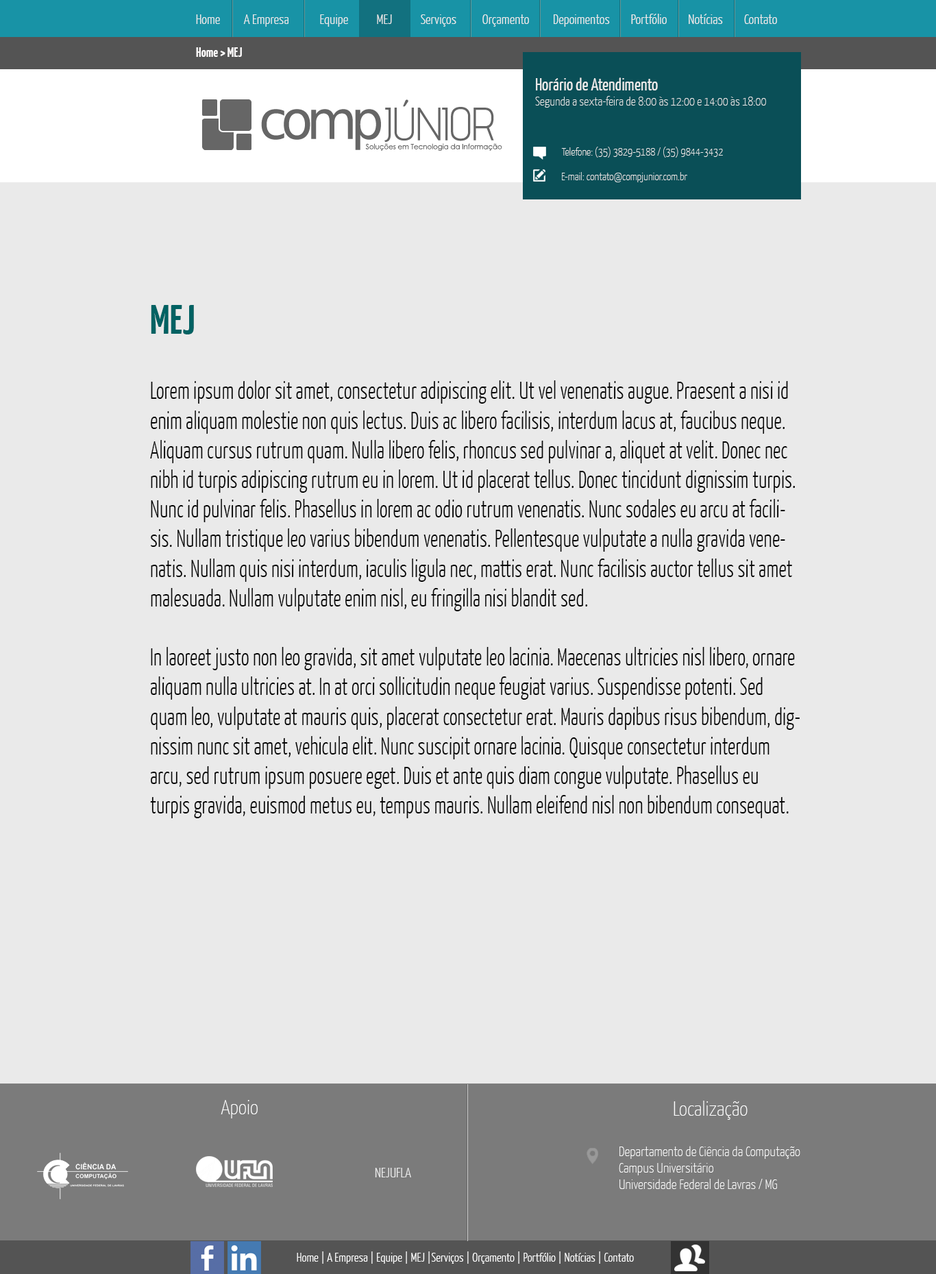
<style>
.page{position:relative;width:936px;height:1274px;background:#eaeaea}
.page>*{position:absolute;margin:0}
.t1{font:13.7px "YanoneKaffeesatz-Light";color:#eaeaea}
.t2{font:17.1px "YanoneKaffeesatz-Light";color:#999999}
.t3{font:13.7px "YanoneKaffeesatz-Bold";color:#fffdfd}
.t4{font:12.3px "YanoneKaffeesatz-ExtraLight";color:#eaeaea}
.t5{font:17.1px "YanoneKaffeesatz-Regular";color:#eaeaea}
.t6{font:11px "YanoneKaffeesatz-ExtraLight";color:#eaeaea}
.t7{font:13.7px "YanoneKaffeesatz-ExtraLight";color:#eaeaea}
.t8{font:41.1px "YanoneKaffeesatz-Bold";color:#006263}
.t9{font:24.7px "YanoneKaffeesatz-Light";color:#050505;scale:0.85 1}
.t10{font:20.6px "YanoneKaffeesatz-ExtraLight";color:#ffffff}
.t11{font:20.6px "YanoneKaffeesatz-ExtraLight";color:#fefefe}
.t12{font:13.7px "YanoneKaffeesatz-ExtraLight";color:#ffffff}
.t13{font:12.3px "YanoneKaffeesatz-Light";color:#ffffff}
</style>
<div class="page">
<p class="t1" style="left:196px;top:14px;width:581px;height:13px"><span class="t2"> </span>Home          A Empresa             Equipe            MEJ            Serviços           Orçamento          Depoimentos         Portfólio         Notícias         Contato</p>
<p class="t3" style="left:196px;top:47px;width:46px;height:10px">Home &gt; MEJ</p>
<p class="t4" style="left:535px;top:77px;width:231px;height:31px"><span class="t5">Horário de Atendimento<br></span>Segunda a sexta-feira de 8:00 às 12:00 e 14:00 às 18:00</p>
<p class="t6" style="left:561px;top:147px;width:162px;height:11px"><span class="t7"><br></span>Telefone: (35) 3829-5188 / (35) 9844-3432</p>
<p class="t6" style="left:562px;top:172px;width:125px;height:10px"><span class="t7"><br></span>E-mail: contato@compjunior.com.br</p>
<p class="t8" style="left:151px;top:305px;width:43px;height:29px">MEJ</p>
<p class="t9" style="left:150px;top:380px;width:650px;height:438px">Lorem ipsum dolor sit amet, consectetur adipiscing elit. Ut vel venenatis augue. Praesent a nisi id enim aliquam molestie non quis lectus. Duis ac libero facilisis, interdum lacus at, faucibus neque. Aliquam cursus rutrum quam. Nulla libero felis, rhoncus sed pulvinar a, aliquet at velit. Donec nec nibh id turpis adipiscing rutrum eu in lorem. Ut id placerat tellus. Donec tincidunt dignissim turpis. Nunc id pulvinar felis. Phasellus in lorem ac odio rutrum venenatis. Nunc sodales eu arcu at facilisis. Nullam tristique leo varius bibendum venenatis. Pellentesque vulputate a nulla gravida venenatis. Nullam quis nisi interdum, iaculis ligula nec, mattis erat. Nunc facilisis auctor tellus sit amet malesuada. Nullam vulputate enim nisl, eu fringilla nisi blandit sed.<br><br>In laoreet justo non leo gravida, sit amet vulputate leo lacinia. Maecenas ultricies nisl libero, ornare aliquam nulla ultricies at. In at orci sollicitudin neque feugiat varius. Suspendisse potenti. Sed quam leo, vulputate at mauris quis, placerat consectetur erat. Mauris dapibus risus bibendum, dignissim nunc sit amet, vehicula elit. Nunc suscipit ornare lacinia. Quisque consectetur interdum arcu, sed rutrum ipsum posuere eget. Duis et ante quis diam congue vulputate. Phasellus eu turpis gravida, euismod metus eu, tempus mauris. Nullam eleifend nisl non bibendum consequat.</p>
<p class="t10" style="left:221px;top:1100px;width:37px;height:18px">Apoio</p>
<p class="t11" style="left:674px;top:1101px;width:74px;height:19px">Localização</p>
<p class="t12" style="left:619px;top:1146px;width:181px;height:43px">Departamento de Ciência da Computação<br>Campus Universitário<br>Universidade Federal de Lavras / MG</p>
<p class="t1" style="left:375px;top:1168px;width:36px;height:9px">NEJUFLA</p>
<p class="t13" style="left:297px;top:1251px;width:337px;height:13px"><span class="t2"> </span>Home | A Empresa | Equipe | MEJ |Serviços | Orçamento | Portfólio | Notícias | Contato</p>
</div>
